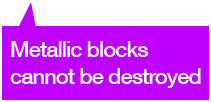
<style>
.page{position:relative;width:211px;height:102px;background:#c000ff}
.page>*{position:absolute;margin:0}
.t1{font:22.2px "HelveticaNeue-Medium";letter-spacing:-0.05em;color:#ffffff}
</style>
<div class="page">
<p class="t1" style="left:10px;top:41px;width:191px;height:47px">Metallic blocks<br>cannot be destroyed</p>
</div>
